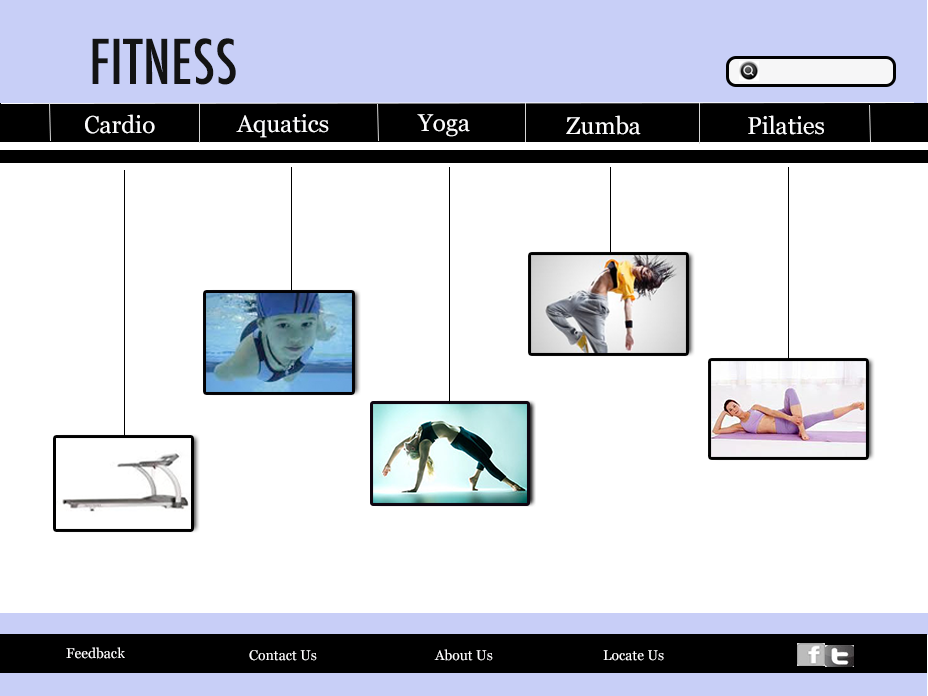
<style>
.page{position:relative;width:928px;height:696px;background:#ffffff}
.page>*{position:absolute;margin:0}
.t1{font:60px "Futura-CondensedMedium";color:#131313}
.t2{font:24px "Georgia";color:#fcfcfd}
.t3{font:14px "Georgia";color:#fefdfe}
</style>
<div class="page">
<p class="t1" style="left:92px;top:38px;width:144px;height:47px">FITNESS</p>
<p class="t2" style="left:85px;top:114px;width:70px;height:20px">Cardio</p>
<p class="t2" style="left:236px;top:114px;width:93px;height:24px">Aquatics</p>
<p class="t2" style="left:417px;top:114px;width:53px;height:23px">Yoga</p>
<p class="t2" style="left:566px;top:115px;width:75px;height:20px">Zumba</p>
<p class="t2" style="left:748px;top:115px;width:76px;height:20px">Pilaties</p>
<p class="t3" style="left:66px;top:647px;width:59px;height:12px">Feedback</p>
<p class="t3" style="left:249px;top:650px;width:68px;height:11px">Contact Us</p>
<p class="t3" style="left:434px;top:649px;width:59px;height:12px">About Us</p>
<p class="t3" style="left:603px;top:650px;width:61px;height:11px">Locate Us</p>
</div>
